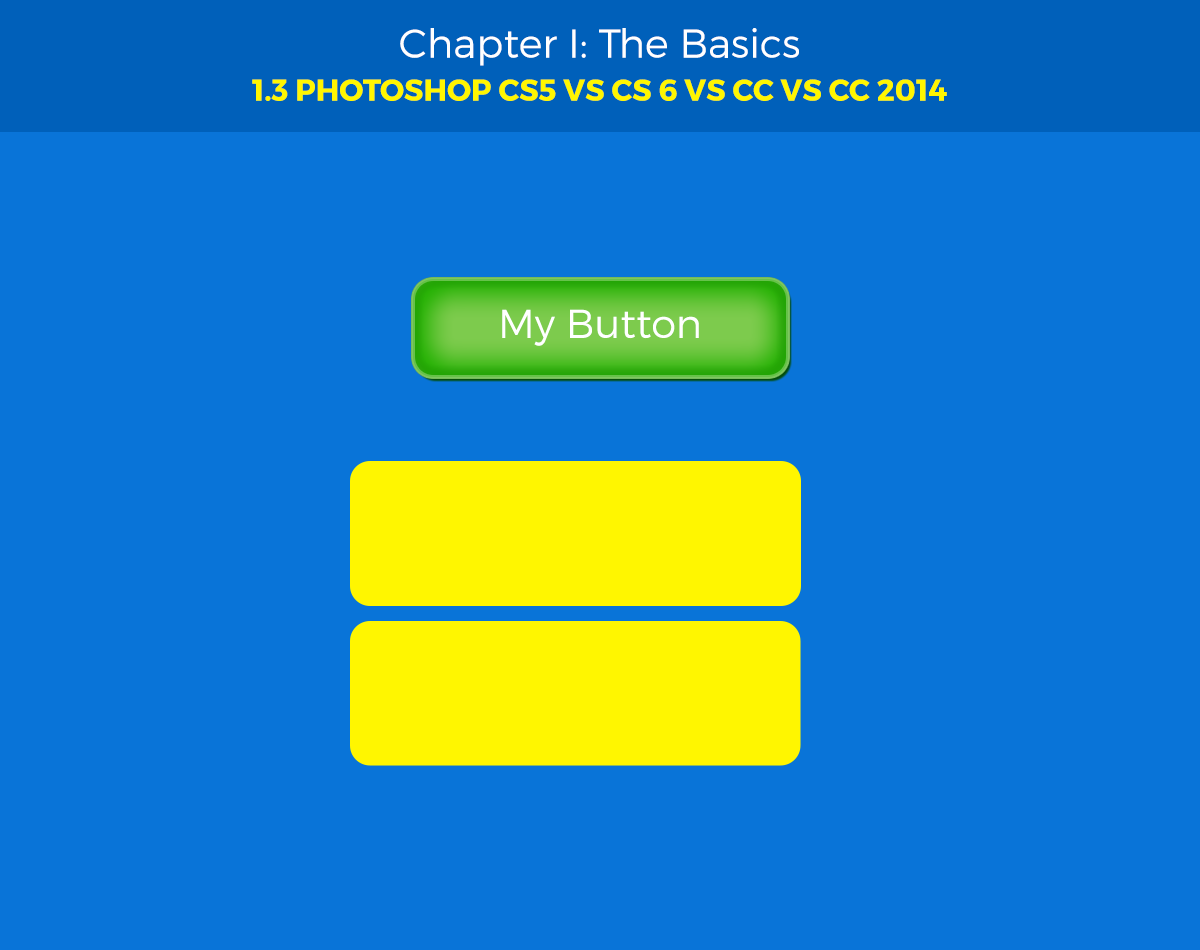
<style>
.page{position:relative;width:1200px;height:950px;background:#0974d8}
.page>*{position:absolute;margin:0}
.t1{font:40px "Montserrat-Light";color:#ffffff}
.t2{font:30px "Montserrat-Bold";color:#fff600;text-transform:uppercase}
</style>
<div class="page">
<p class="t1" style="left:400px;top:28px;width:399px;height:38px">Chapter I: The Basics</p>
<p class="t2" style="left:252px;top:79px;width:695px;height:22px">1.3 Photoshop CS5 vs CS 6 vs CC vs CC 2014</p>
<p class="t1" style="left:502px;top:309px;width:197px;height:37px">My Button</p>
</div>
